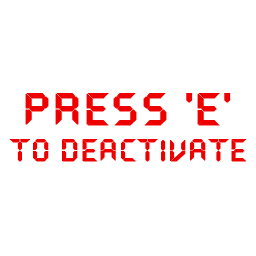
<style>
.page{position:relative;width:256px;height:256px;background:#ffffff}
.page>*{position:absolute;margin:0}
.t1{font:46.1px "QuartzMS";color:#ee0000;font-weight:bold}
.t2{font:30.7px "QuartzMS";color:#ee0000;font-weight:bold}
</style>
<div class="page">
<p class="t1" style="left:25px;top:93px;width:206px;height:33px">Press 'e'</p>
<p class="t2" style="left:9px;top:139px;width:238px;height:23px">To Deactivate</p>
</div>
